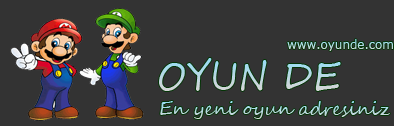
<style>
.page{position:relative;width:394px;height:126px;background:#333333}
.page>*{position:absolute;margin:0}
.t1{font:12px "Verdana";letter-spacing:-0.005em;color:#b6d9e4}
.t2{font:37.7px "SegoeScript";letter-spacing:-0.005em;scale:0.96 1}
.t3{font:18px "SegoeScript";letter-spacing:-0.005em;color:#b6d9e4}
</style>
<div class="page">
<p class="t1" style="left:287px;top:39px;width:106px;height:12px">www.oyunde.com</p>
<p class="t2" style="left:159px;top:58px;width:182px;height:33px">OYUN DE</p>
<p class="t3" style="left:160px;top:101px;width:230px;height:18px">En yeni oyun adresiniz</p>
</div>
